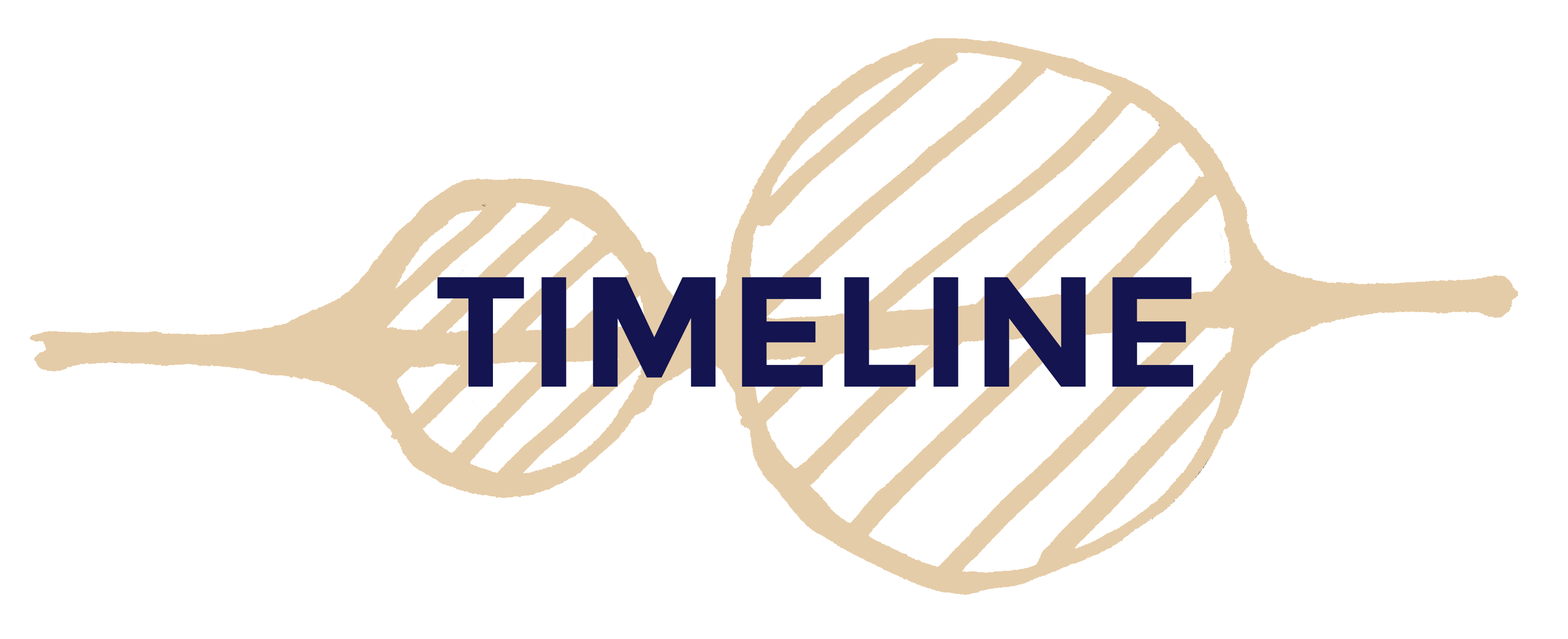
<style>
.page{position:relative;width:1568px;height:639px;background:#ffffff}
.page>*{position:absolute;margin:0}
.t1{font:156.4px "Montserrat-Bold";color:#131450}
</style>
<div class="page">
<p class="t1" style="left:437px;top:277px;width:756px;height:110px">TIMELINE</p>
</div>
